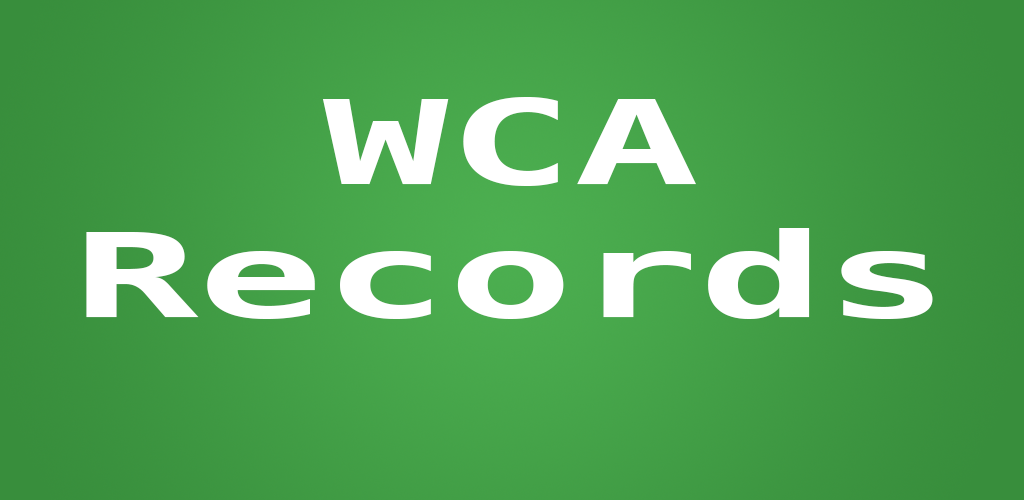
<style>
.page{position:relative;width:1024px;height:500px}
.page>*{position:absolute;margin:0}
.t1{font:116.7px/133.4px "DejaVuSansMono-Bold";color:#ffffff;scale:1.78 1}
</style>
<div class="page">
<p class="t1" style="left:86px;top:97px;width:847px;height:222px;text-align:center">WCA<br>Records</p>
</div>
